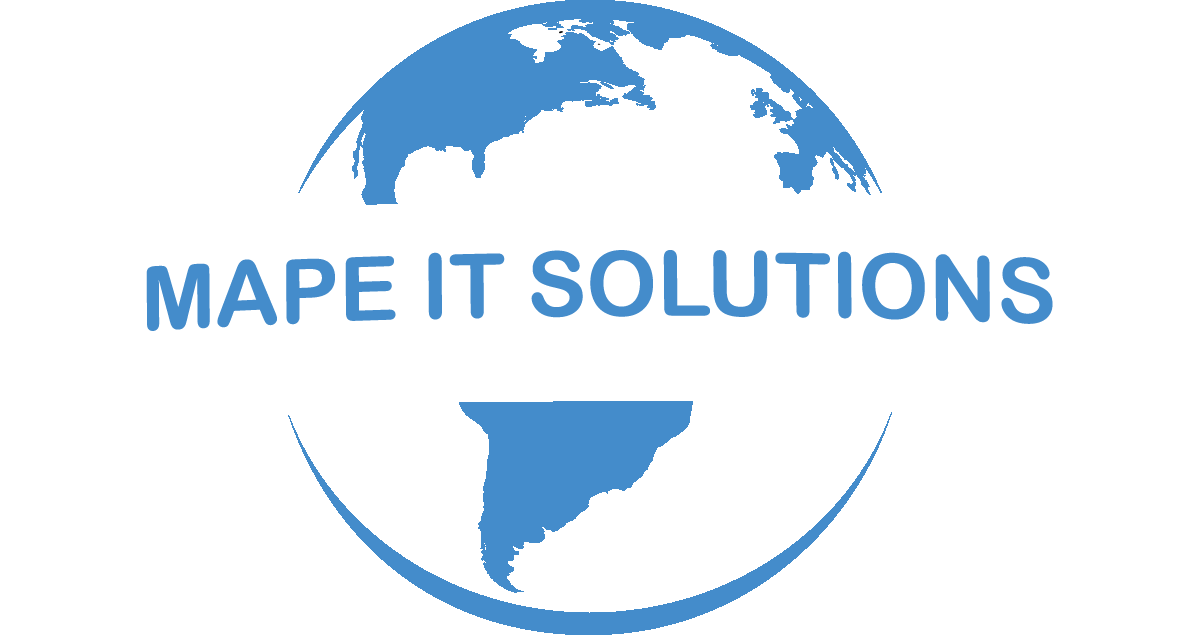
<style>
.page{position:relative;width:1200px;height:635px;background:#ffffff}
.page>*{position:absolute;margin:0}
.t1{font:89.3px "ArialRoundedMTBold";color:#448ccb}
</style>
<div class="page">
<p class="t1" style="left:146px;top:250px;width:907px;height:81px">MAPE IT SOLUTIONS</p>
</div>
